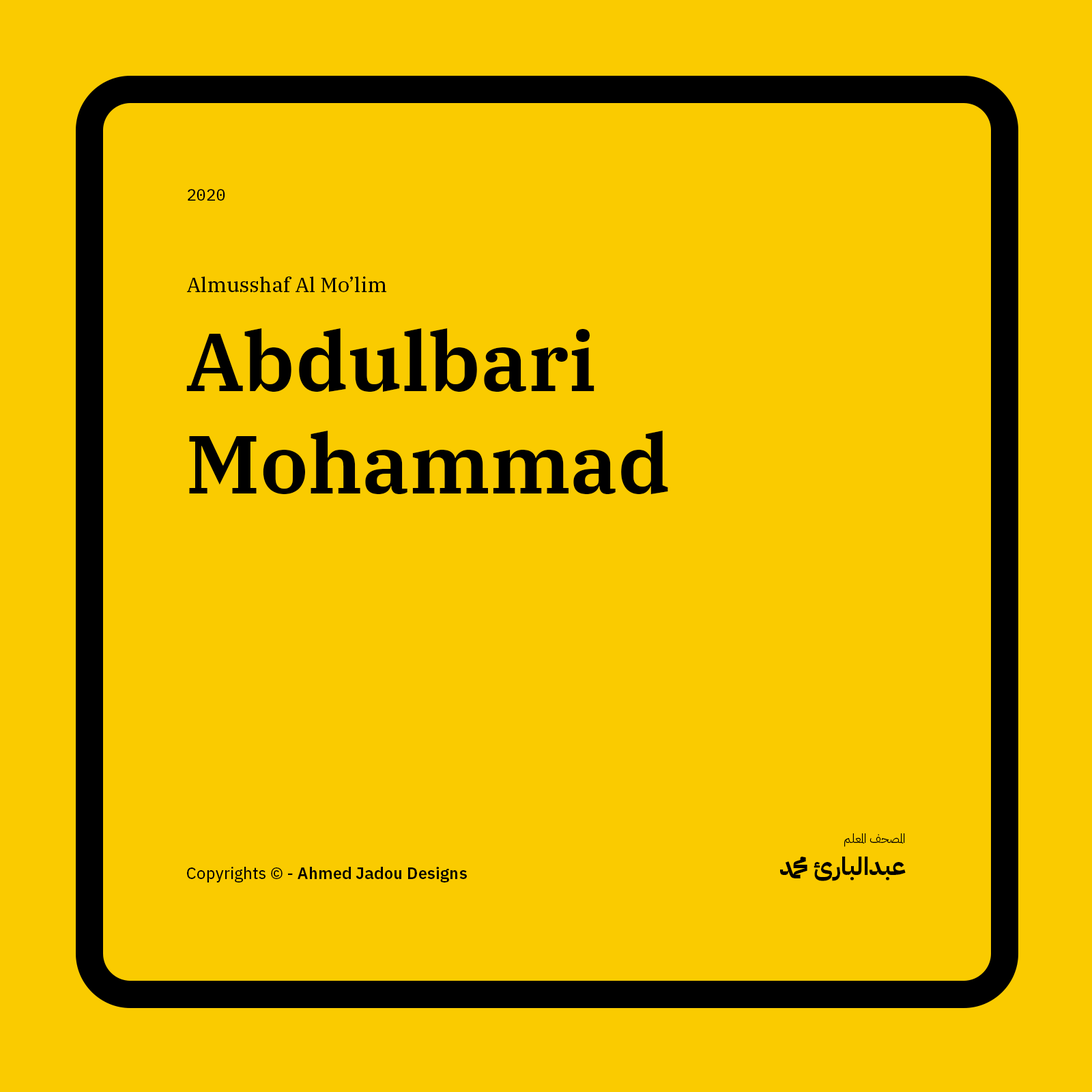
<style>
.page{position:relative;width:1092px;height:1092px;background:#facb00}
.page>*{position:absolute;margin:0}
.t1{font:16.4px "IBMPlexMono-Text";color:#000000}
.t2{font:20.5px "IBMPlexSerif-Text";color:#000000}
.t3{font:81.9px/102.7px "IBMPlexSerif-SemiBold";color:#000000}
.t4{font:12.3px "IBMPlexArabic-Light";color:#000000}
.t5{font:24.6px "IBMPlexArabic-Bold";color:#000000}
.t6{font:16.4px "IBMPlexSans-SemiBold";color:#000000}
.t7{font:16.4px "IBMPlexSans-Text";color:#000000}
</style>
<div class="page">
<p class="t1" style="left:188px;top:189px;width:37px;height:12px">2020</p>
<p class="t2" style="left:187px;top:276px;width:199px;height:16px">Almusshaf Al Mo’lim</p>
<p class="t3" style="left:186px;top:328px;width:482px;height:166px">Abdulbari Mohammad</p>
<p class="t4" style="left:844px;top:833px;width:61px;height:14px">المصحف المعلم</p>
<p class="t5" style="left:780px;top:857px;width:126px;height:24px">عبدالبارئ محمد</p>
<p class="t6" style="left:187px;top:867px;width:280px;height:15px"><span class="t7">Copyrights © - </span>Ahmed Jadou Designs</p>
</div>
